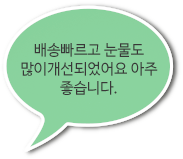
<style>
.page{position:relative;width:183px;height:159px;background:#ffffff}
.page>*{position:absolute;margin:0}
.t1{font:15px/19px "NanumBarunGothic";color:#393838}
</style>
<div class="page">
<p class="t1" style="left:21px;top:43px;width:137px;height:52px;text-align:center">배송빠르고 눈물도 많이개선되었어요 아주 좋습니다.</p>
</div>
